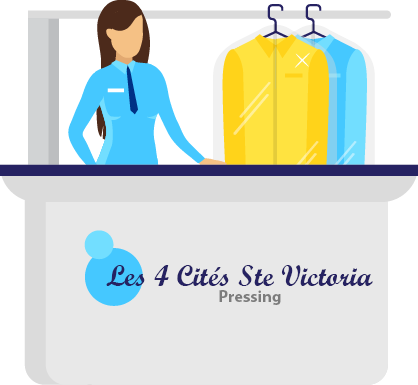
<style>
.page{position:relative;width:418px;height:385px;background:#e8e8e8}
.page>*{position:absolute;margin:0}
.t1{font:29.2px "ScriptMTBold";color:#262262}
.t2{font:16.7px "MyriadPro-Bold";color:#7c7c7c}
</style>
<div class="page">
<p class="t1" style="left:106px;top:265px;width:267px;height:21px">Les 4 Cités Ste Victoria</p>
<p class="t2" style="left:219px;top:290px;width:62px;height:15px">Pressing</p>
</div>
